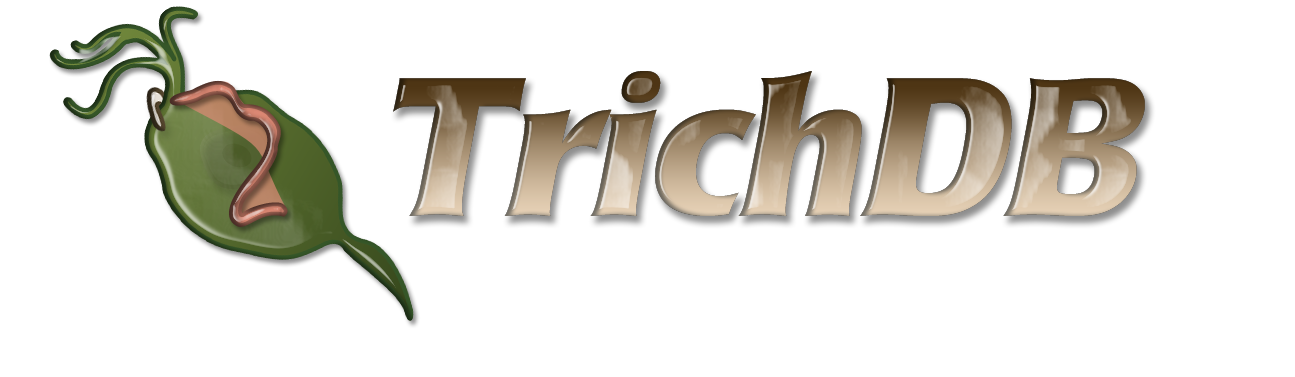
<style>
.page{position:relative;width:1295px;height:377px;background:#ffffff}
.page>*{position:absolute;margin:0}
.t1{font:200px "PopplLaudatio-Bold";letter-spacing:-0.02em}
</style>
<div class="page">
<p class="t1" style="left:393px;top:71px;width:752px;height:145px">TrichDB</p>
</div>
